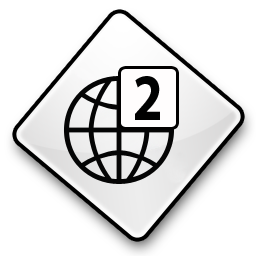
<style>
.page{position:relative;width:256px;height:256px;background:#ffffff}
.page>*{position:absolute;margin:0}
.t1{font:66px "MyriadPro-Bold";letter-spacing:0.005em;color:#010101;scale:0.82 1}
</style>
<div class="page">
<p class="t1" style="left:135px;top:76px;width:25px;height:44px">2</p>
</div>
